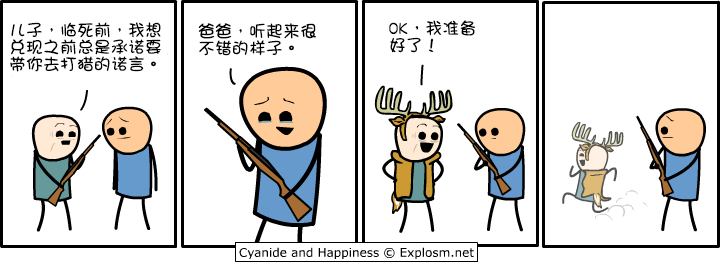
<style>
.page{position:relative;width:721px;height:263px;background:#ffffff}
.page>*{position:absolute;margin:0}
.t1{font:17px/17px "DFGirl";color:#000000}
</style>
<div class="page">
<p class="t1" style="left:10px;top:22px;width:151px;height:50px">儿子，临死前，我想<br>兑现之前总是承诺要<br>带你去打猎的诺言。</p>
<p class="t1" style="left:198px;top:23px;width:119px;height:33px">爸爸，听起来很<br>不错的样子。</p>
<p class="t1" style="left:389px;top:20px;width:87px;height:33px">OK，我准备<br>好了！</p>
</div>
